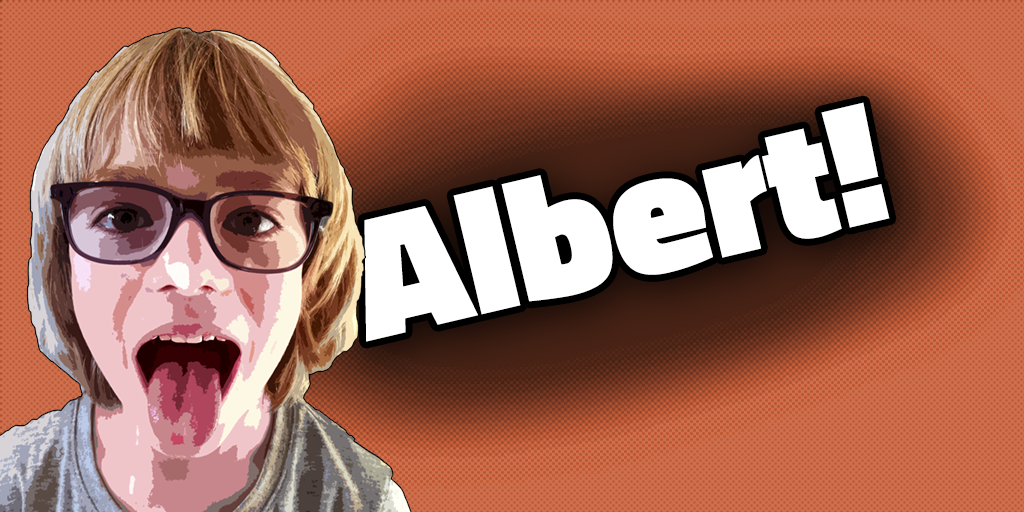
<style>
.page{position:relative;width:1024px;height:512px}
.page>*{position:absolute;margin:0}
.t1{font:176.6px "TitilliumWeb-Black";color:#ffffff}
</style>
<div class="page">
<p class="t1" style="left:364px;top:102px;width:526px;height:240px;rotate:-13deg">Albert!</p>
</div>
